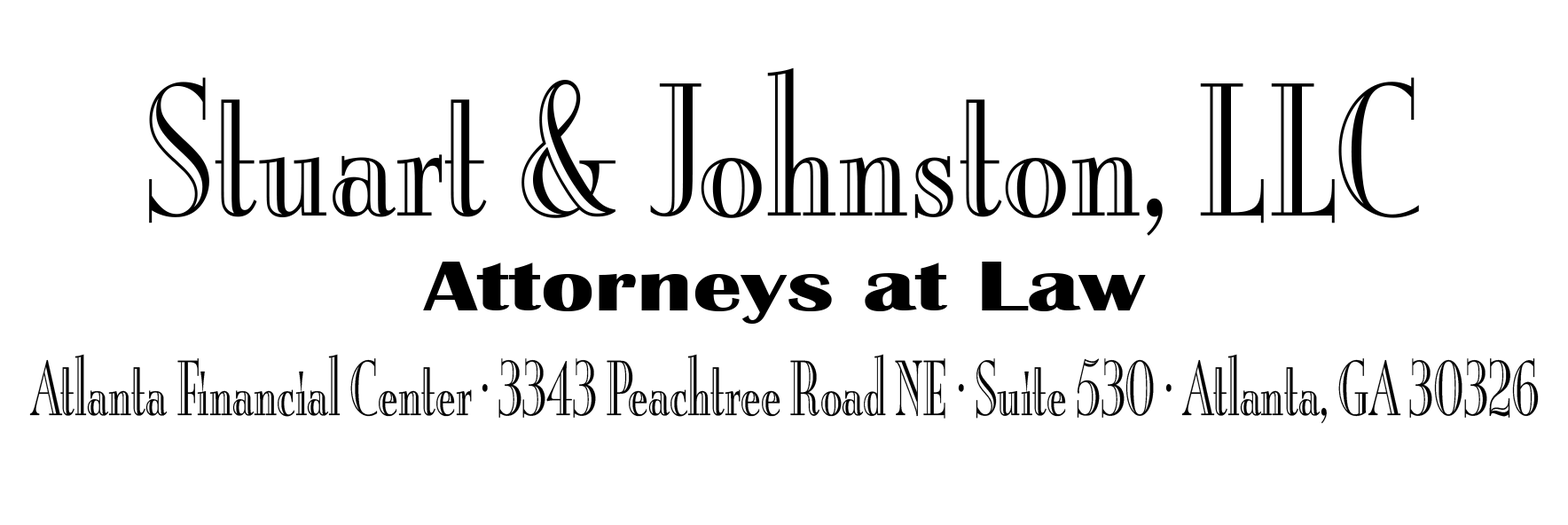
<style>
.page{position:relative;width:1568px;height:525px;background:#ffffff}
.page>*{position:absolute;margin:0}
.t1{font:198.1px "BurlingtonLetPlain";color:#000000;scale:0.84 1}
.t2{font:72.4px "BritannicBold";color:#000000;scale:1.36 1}
.t3{font:81.4px "BurlingtonLetPlain";color:#000000;scale:0.66 1}
</style>
<div class="page">
<p class="t1" style="left:149px;top:67px;width:1270px;height:169px">Stuart &amp; Johnston, LLC</p>
<p class="t2" style="left:423px;top:262px;width:723px;height:62px">Attorneys at Law</p>
<p class="t3" style="left:29px;top:354px;width:1510px;height:70px">Atlanta Financial Center · 3343 Peachtree Road NE · Suite 530 · Atlanta, GA 30326</p>
</div>
